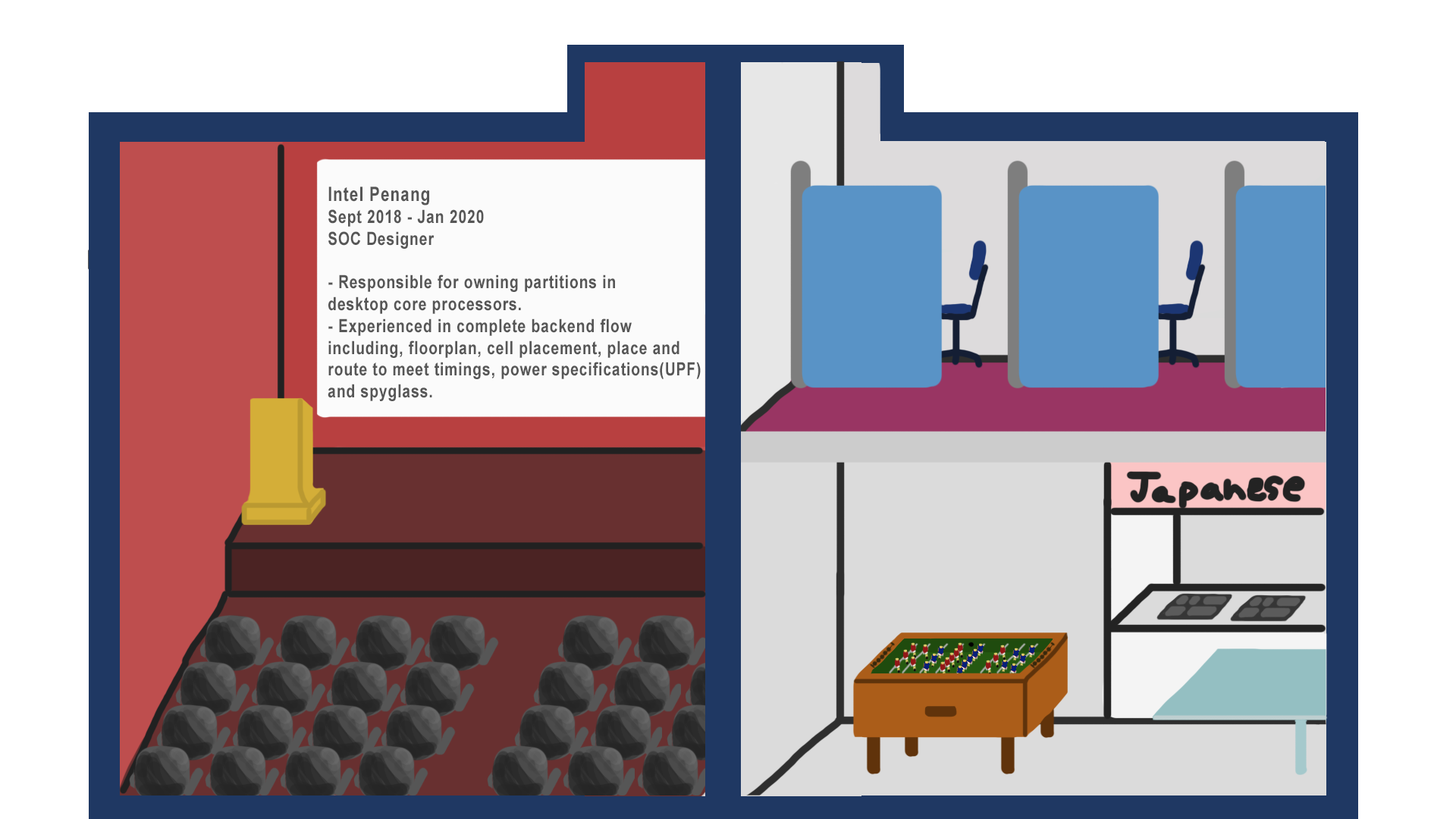
<style>
.page{position:relative;width:1456px;height:819px;background:#ffffff}
.page>*{position:absolute;margin:0}
.t1{font:18.2px "Arial-BoldMT";letter-spacing:0.05em;color:#565656;scale:0.8 1}
.t2{font:19.7px "Arial-BoldMT";letter-spacing:0.05em;color:#565656;scale:0.8 1}
</style>
<div class="page">
<p class="t1" style="left:328px;top:187px;width:373px;height:214px"><span class="t2">Intel Penang <br></span>Sept 2018 - Jan 2020<br>SOC Designer<br> <br>- Responsible for owning partitions in <br>desktop core processors.<br>- Experienced in complete backend flow <br>including, floorplan, cell placement, place and <br>route to meet timings, power specifications(UPF)<br>and spyglass.</p>
</div>
